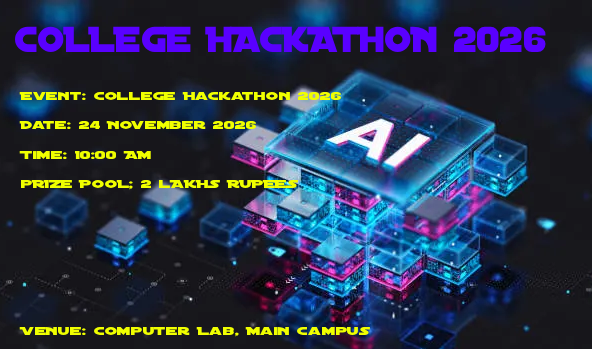
<style>
.page{position:relative;width:592px;height:349px}
.page>*{position:absolute;margin:0}
.t1{font:39px "DistantGalaxy";color:#5900ff}
.t2{font:12.2px "DistantGalaxy";color:#f0ff00;scale:1.49 1}
</style>
<div class="page">
<p class="t1" style="left:15px;top:26px;width:531px;height:26px">COLLEGE HACKATHON 2026</p>
<p class="t2" style="left:19px;top:92px;width:351px;height:245px">Event: College Hackathon 2026<br><br>Date: 24 November 2026<br><br>Time: 10:00 AM<br><br>pRIZE POOL; 2 lAKHS RUPEES<br><br><br><br><br><br><br><br><br><br>Venue: Computer Lab, Main Campus</p>
</div>
